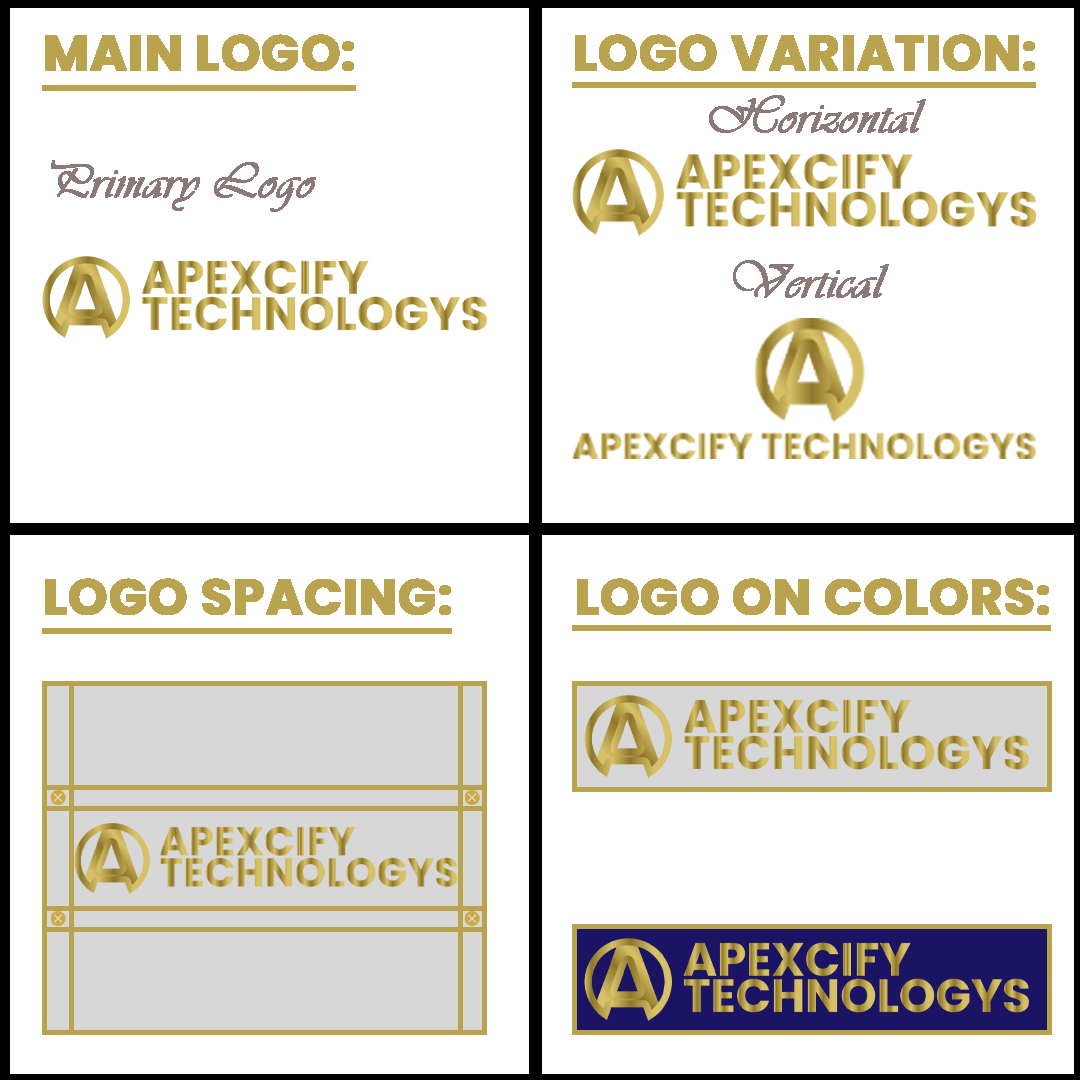
<style>
.page{position:relative;width:1080px;height:1080px;background:#ffffff}
.page>*{position:absolute;margin:0}
.t1{font:50px "Poppins-Bold";color:#b9a34e;text-transform:uppercase;font-weight:bold}
.t2{font:50px "Vivaldii";color:#8b7878;font-weight:bold}
</style>
<div class="page">
<p class="t1" style="left:45px;top:34px;width:309px;height:37px">main logo:</p>
<p class="t1" style="left:575px;top:34px;width:460px;height:37px">logo variation:</p>
<p class="t2" style="left:709px;top:95px;width:217px;height:38px">Horizontal</p>
<p class="t2" style="left:51px;top:160px;width:265px;height:52px">Primary Logo</p>
<p class="t2" style="left:733px;top:260px;width:156px;height:38px">Vertical</p>
<p class="t1" style="left:45px;top:578px;width:406px;height:37px">logo spacing:</p>
<p class="t1" style="left:577px;top:578px;width:472px;height:37px">logo on colors:</p>
</div>
